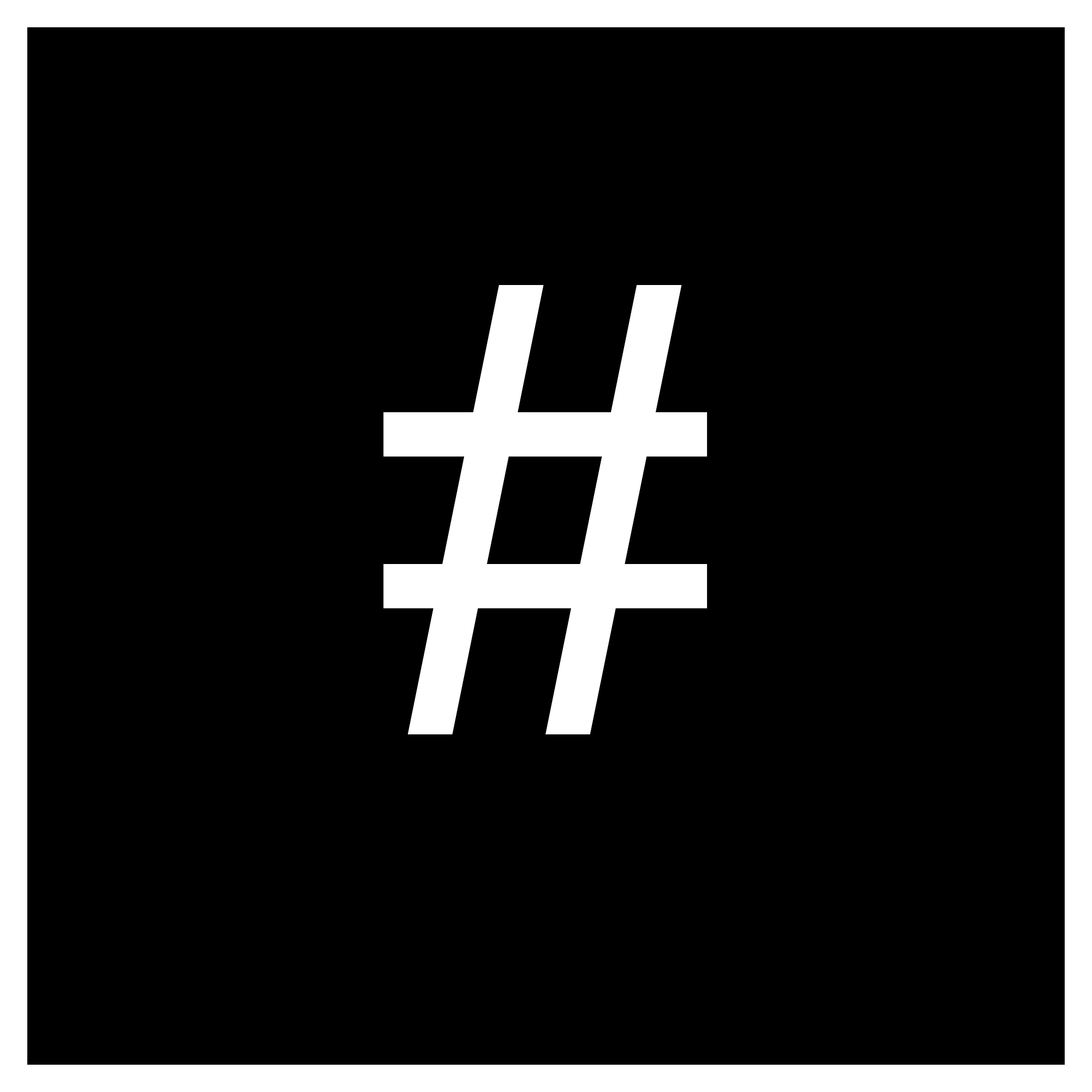
<style>
.page{position:relative;width:1092px;height:1092px;background:#000000}
.page>*{position:absolute;margin:0}
.t1{font:606.7px "ArialMT";color:#ffffff}
</style>
<div class="page">
<p class="t1" style="left:383px;top:285px;width:324px;height:449px">#</p>
</div>
